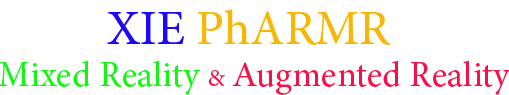
<style>
.page{position:relative;width:509px;height:95px;background:#ffffff}
.page>*{position:absolute;margin:0}
.t1{font:48px "AdobeHebrew-Regular";color:#f7b608}
.t2{font:48px "AdobeHebrew-Regular";color:#1e08f7}
.t3{font:35px "AdobeHebrew-Regular";color:#f61248}
.t4{font:35px "AdobeHebrew-Regular";color:#12f612}
.t5{font:24px "AdobeHebrew-Regular";color:#f61248}
</style>
<div class="page">
<p class="t1" style="left:107px;top:9px;width:284px;height:36px"><span class="t2">XIE </span>PhARMR</p>
<p class="t3" style="left:0px;top:60px;width:510px;height:35px"><span class="t4">Mixed Reality </span><span class="t5">&amp; </span>Augmented Reality</p>
</div>
